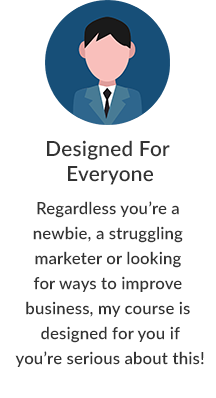
<style>
.page{position:relative;width:216px;height:398px;background:#ffffff}
.page>*{position:absolute;margin:0}
.t1{font:16.7px/25px "Lato-Semibold";letter-spacing:0.01em;color:#333333}
.t2{font:20.8px "Lato-Semibold";letter-spacing:0.01em;color:#333333}
.t3{font:16.7px/33.3px "Lato-Semibold";letter-spacing:0.01em;color:#333333}
</style>
<div class="page">
<p class="t1" style="left:15px;top:140px;width:189px;height:227px;text-align:center"><span class="t2">Designed For <br>Everyone<br></span><span class="t3">Regardless you’re a <br></span>newbie, a struggling <br>marketer or looking <br>for ways to improve <br>business, my course is <br>designed for you if<br>you’re serious about this!</p>
</div>
